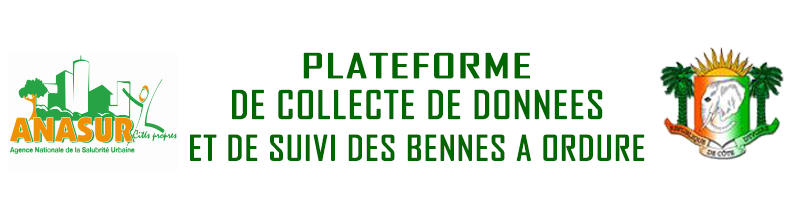
<style>
.page{position:relative;width:800px;height:217px;background:#ffffff}
.page>*{position:absolute;margin:0}
.t1{font:32.3px "AgencyFB-Reg";letter-spacing:0.005em;color:#006600;font-weight:bold;scale:1.7 1}
.t2{font:36.9px "AgencyFB-Reg";letter-spacing:0.005em;color:#006600;font-weight:bold;scale:1.16 1}
.t3{font:33.1px "AgencyFB-Reg";letter-spacing:0.005em;color:#006600;font-weight:bold;scale:1.17 1}
</style>
<div class="page">
<p class="t1" style="left:303px;top:52px;width:227px;height:27px">PLATEFORME</p>
<p class="t2" style="left:232px;top:89px;width:371px;height:31px">DE COLLECTE DE DONNEES</p>
<p class="t3" style="left:190px;top:134px;width:455px;height:27px">ET DE SUIVI DES BENNES A ORDURE</p>
</div>
